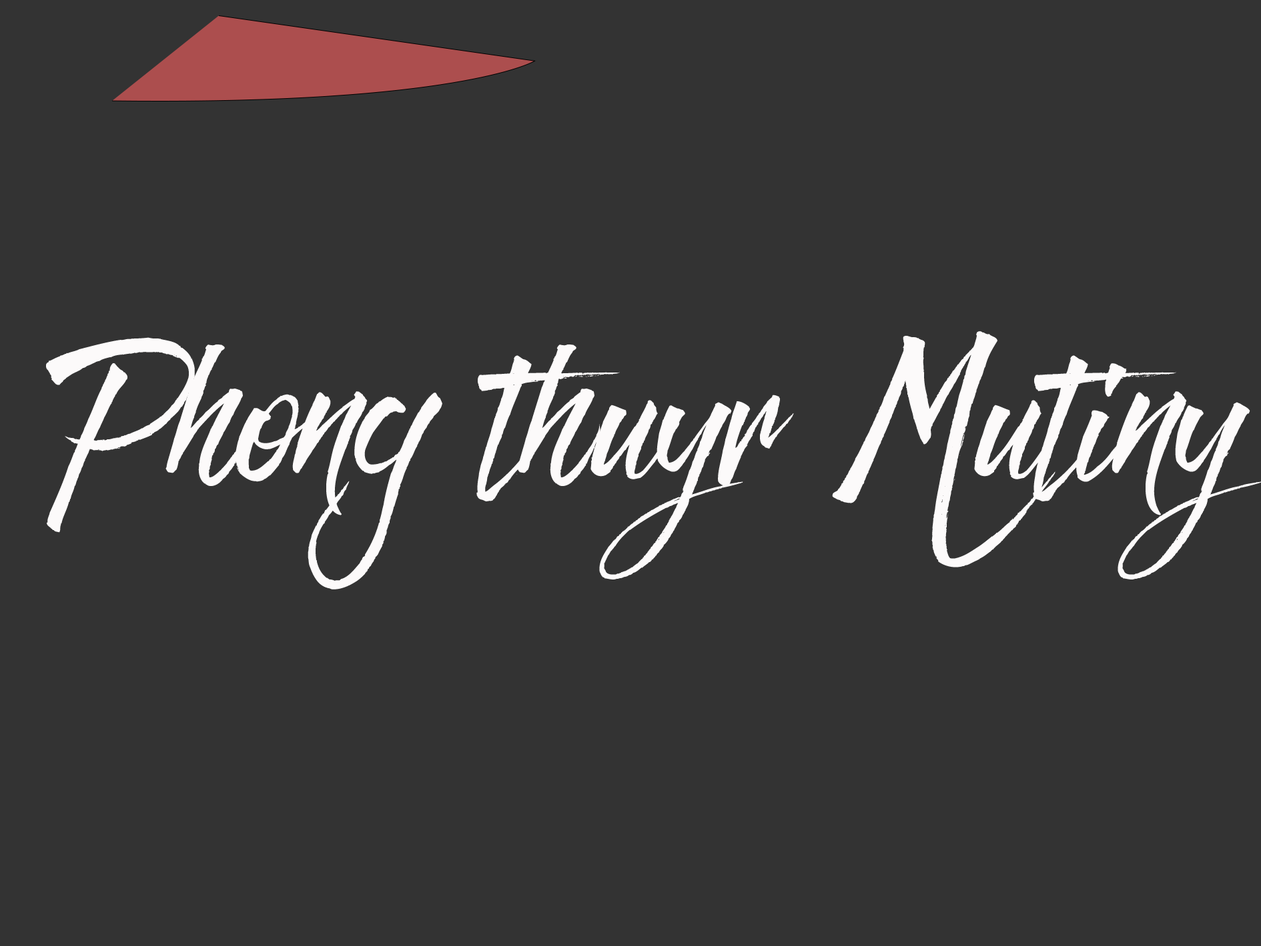
<style>
.page{position:relative;width:1261px;height:946px;background:#333333}
.page>*{position:absolute;margin:0}
.t1{font:151.4px "SVN-FreshScript";color:#fcfafa}
</style>
<div class="page">
<p class="t1" style="left:46px;top:331px;width:1216px;height:258px;text-align:center">Phong thuyr Mutiny</p>
</div>
